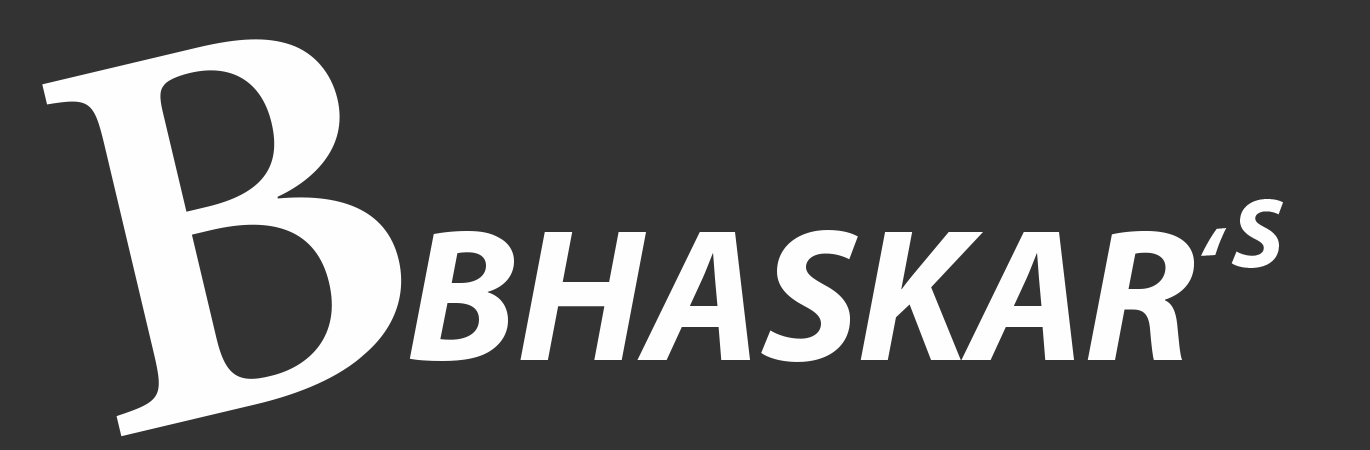
<style>
.page{position:relative;width:1370px;height:450px;background:#333333}
.page>*{position:absolute;margin:0}
.t1{font:601.8px "AdobeDevanagari-Bold";color:#fefefe;scale:1.05 1}
.t2{font:100px "MyriadPro-BoldIt";color:#fefefe}
.t3{font:190px "MyriadPro-BoldIt";color:#fefefe}
</style>
<div class="page">
<p class="t1" style="left:42px;top:39px;width:360px;height:398px;rotate:-13deg">B</p>
<p class="t2" style="left:1231px;top:199px;width:52px;height:69px">S</p>
<p class="t3" style="left:409px;top:230px;width:785px;height:132px">BHASKAR</p>
<p class="t2" style="left:1201px;top:228px;width:26px;height:28px">‘</p>
</div>
